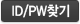
<style>
.page{position:relative;width:80px;height:24px}
.page>*{position:absolute;margin:0}
.t1{font:14px "YDIYGO340";color:#ffffff;scale:0.9 1}
</style>
<div class="page">
<p class="t1" style="left:12px;top:4px;width:58px;height:14px">ID/PW찾기</p>
</div>
